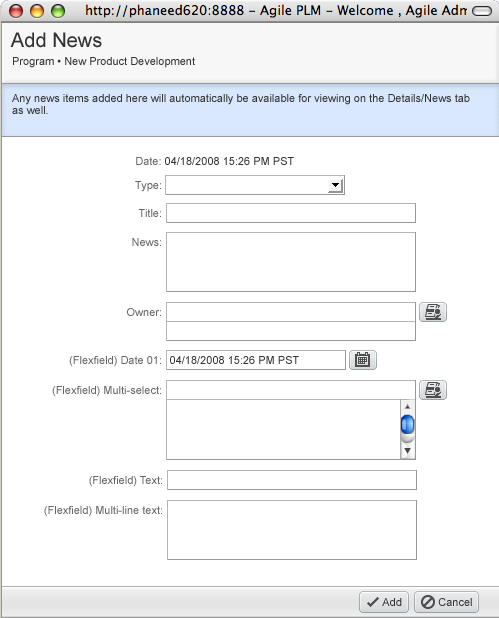
<style>
.page{position:relative;width:499px;height:618px;background:#ffffff}
.page>*{position:absolute;margin:0}
.t1{font:20px "ArialMT";color:#333333}
.t2{font:11px "ArialMT";color:#333333}
.t3{font:11px/12px "ArialMT";color:#333333}
.t4{font:11px "ArialMT";color:#666666}
</style>
<div class="page">
<p class="t1" style="left:10px;top:32px;width:92px;height:16px">Add News</p>
<p class="t2" style="left:13px;top:57px;width:182px;height:11px">Program • New Product Development</p>
<p class="t3" style="left:12px;top:94px;width:458px;height:20px">Any news items added here will automatically be available for viewing on the Details/News tab <br>as well.</p>
<p class="t2" style="left:136px;top:157px;width:158px;height:8px"><span class="t4">Date: </span>04/18/2008 15:26 PM PST</p>
<p class="t4" style="left:135px;top:181px;width:26px;height:11px">Type:</p>
<p class="t4" style="left:138px;top:209px;width:23px;height:8px">Title:</p>
<p class="t4" style="left:132px;top:238px;width:29px;height:8px">News:</p>
<p class="t4" style="left:127px;top:308px;width:34px;height:8px">Owner:</p>
<p class="t4" style="left:69px;top:356px;width:92px;height:11px">(Flexfield) Date 01:</p>
<p class="t2" style="left:170px;top:356px;width:129px;height:8px">04/18/2008 15:26 PM PST</p>
<p class="t4" style="left:52px;top:386px;width:109px;height:11px">(Flexfield) Multi-select:</p>
<p class="t4" style="left:89px;top:476px;width:73px;height:11px">(Flexfield) Text:</p>
<p class="t4" style="left:44px;top:506px;width:118px;height:11px">(Flexfield) Multi-line text:</p>
<p class="t2" style="left:382px;top:598px;width:20px;height:8px">Add</p>
<p class="t2" style="left:438px;top:598px;width:34px;height:8px">Cancel</p>
</div>
